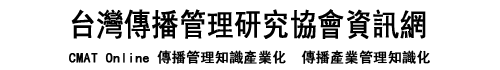
<style>
.page{position:relative;width:500px;height:70px;background:#ffffff}
.page>*{position:absolute;margin:0}
.t1{font:31.2px "SimHei";color:#000000;font-weight:bold;scale:0.86 1}
.t2{font:14px "SimHei";color:#000000;font-weight:bold}
</style>
<div class="page">
<p class="t1" style="left:71px;top:9px;width:355px;height:30px">台灣傳播管理研究協會資訊網</p>
<p class="t2" style="left:69px;top:50px;width:361px;height:14px">CMAT Online 傳播管理知識產業化  傳播產業管理知識化</p>
</div>
